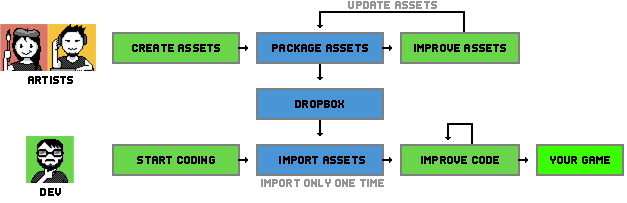
<style>
.page{position:relative;width:627px;height:203px;background:#ffffff}
.page>*{position:absolute;margin:0}
.t1{font:8px "Header0865";letter-spacing:0.025em;color:#959595;text-transform:uppercase}
.t2{font:8px "Header0865";letter-spacing:0.025em;color:#000000;text-transform:uppercase}
</style>
<div class="page">
<p class="t1" style="left:348px;top:1px;width:89px;height:8px">update assets</p>
<p class="t2" style="left:132px;top:44px;width:88px;height:8px">create assets</p>
<p class="t2" style="left:272px;top:44px;width:96px;height:8px">package assets</p>
<p class="t2" style="left:414px;top:44px;width:92px;height:8px">improve assets</p>
<p class="t2" style="left:28px;top:76px;width:45px;height:8px">artists</p>
<p class="t2" style="left:295px;top:100px;width:49px;height:8px">dropbox</p>
<p class="t2" style="left:137px;top:156px;width:78px;height:8px">start coding</p>
<p class="t2" style="left:279px;top:156px;width:86px;height:8px">import assets</p>
<p class="t2" style="left:421px;top:156px;width:78px;height:8px">improve code</p>
<p class="t2" style="left:550px;top:156px;width:60px;height:8px">Your game</p>
<p class="t1" style="left:261px;top:179px;width:123px;height:8px">import only one time</p>
<p class="t2" style="left:40px;top:188px;width:21px;height:8px">dev</p>
</div>
